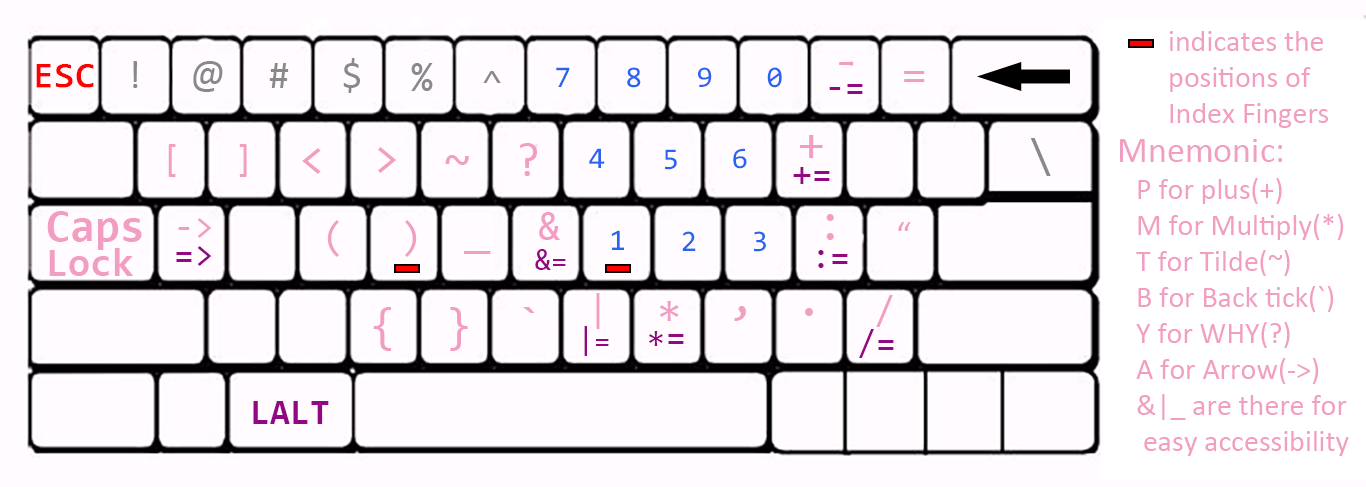
<style>
.page{position:relative;width:1366px;height:487px;background:#fffbff}
.page>*{position:absolute;margin:0}
.t1{font:30px/36px "Calibri";color:#f19ec2}
.t2{font:36px "Consolas";color:#ff0000;font-weight:bold}
.t3{font:40px "Calibri";color:#898989}
.t4{font:40px "Consolas";color:#898989}
.t5{font:48px "Consolas";color:#f19ec2}
.t6{font:30px "Consolas";color:#2764f0}
.t7{font:36px "Consolas";color:#920783}
.t8{font:40px "Calibri";color:#f19ec2}
.t9{font:48px "Consolas";color:#898989}
.t10{font:36px "Calibri";color:#f19ec2}
.t11{font:45px "Consolas-Bold";color:#f19ec2}
.t12{font:36px "Consolas";color:#f19ec2}
.t13{font:40px "Consolas";color:#f19ec2}
.t14{font:40px "Consolas-Bold";color:#f19ec2}
.t15{font:30px "Consolas";color:#920783}
.t16{font:36px "Consolas-Bold";color:#920783}
</style>
<div class="page">
<p class="t1" style="left:1169px;top:31px;width:159px;height:97px">indicates the <br>positions of <br>Index Fingers</p>
<p class="t2" style="left:36px;top:64px;width:58px;height:24px">ESC</p>
<p class="t3" style="left:133px;top:61px;width:5px;height:27px">!</p>
<p class="t3" style="left:193px;top:61px;width:30px;height:31px">@</p>
<p class="t3" style="left:269px;top:63px;width:20px;height:25px">#</p>
<p class="t3" style="left:343px;top:58px;width:17px;height:35px">$</p>
<p class="t4" style="left:411px;top:63px;width:22px;height:28px">%</p>
<p class="t5" style="left:839px;top:62px;width:15px;height:3px">-</p>
<p class="t4" style="left:483px;top:71px;width:18px;height:12px">^</p>
<p class="t6" style="left:556px;top:67px;width:14px;height:20px">7</p>
<p class="t6" style="left:627px;top:67px;width:14px;height:21px">8</p>
<p class="t6" style="left:698px;top:67px;width:14px;height:20px">9</p>
<p class="t6" style="left:767px;top:67px;width:15px;height:21px">0</p>
<p class="t5" style="left:904px;top:71px;width:21px;height:11px">=</p>
<p class="t7" style="left:829px;top:84px;width:34px;height:10px">-=</p>
<p class="t5" style="left:800px;top:135px;width:23px;height:23px">+</p>
<p class="t8" style="left:168px;top:144px;width:8px;height:33px">[</p>
<p class="t8" style="left:239px;top:144px;width:8px;height:33px">]</p>
<p class="t5" style="left:302px;top:148px;width:19px;height:26px">&lt;</p>
<p class="t5" style="left:378px;top:147px;width:18px;height:26px">&gt;</p>
<p class="t6" style="left:589px;top:148px;width:16px;height:20px">4</p>
<p class="t6" style="left:665px;top:149px;width:12px;height:21px">5</p>
<p class="t6" style="left:733px;top:148px;width:14px;height:21px">6</p>
<p class="t9" style="left:1030px;top:138px;width:21px;height:38px">\</p>
<p class="t10" style="left:1120px;top:139px;width:162px;height:23px">Mnemonic:</p>
<p class="t5" style="left:445px;top:155px;width:24px;height:10px">~</p>
<p class="t7" style="left:793px;top:167px;width:37px;height:17px">+=</p>
<p class="t1" style="left:1136px;top:178px;width:213px;height:278px">P for plus(+)<br>M for Multiply(*)<br>T for Tilde(~)<br>B for Back tick(`)<br>Y for WHY(?)<br>A for Arrow(-&gt;)<br>&amp;|_ are there for<br> easy accessibility</p>
<p class="t11" style="left:47px;top:211px;width:95px;height:39px">Caps</p>
<p class="t12" style="left:178px;top:218px;width:34px;height:20px">-&gt;</p>
<p class="t13" style="left:327px;top:220px;width:12px;height:37px">(</p>
<p class="t13" style="left:405px;top:220px;width:12px;height:37px">)</p>
<p class="t13" style="left:539px;top:212px;width:21px;height:28px">&amp;</p>
<p class="t5" style="left:826px;top:214px;width:8px;height:26px">:</p>
<p class="t6" style="left:611px;top:230px;width:13px;height:20px">1</p>
<p class="t6" style="left:682px;top:231px;width:14px;height:20px">2</p>
<p class="t6" style="left:754px;top:231px;width:12px;height:21px">3</p>
<p class="t7" style="left:176px;top:246px;width:36px;height:20px">=&gt;</p>
<p class="t14" style="left:49px;top:248px;width:85px;height:28px">Lock</p>
<p class="t5" style="left:464px;top:251px;width:27px;height:3px">_</p>
<p class="t15" style="left:535px;top:249px;width:31px;height:21px">&amp;=</p>
<p class="t7" style="left:818px;top:250px;width:30px;height:18px">:=</p>
<p class="t12" style="left:596px;top:293px;width:4px;height:36px">|</p>
<p class="t5" style="left:660px;top:301px;width:19px;height:20px">*</p>
<p class="t13" style="left:876px;top:295px;width:17px;height:32px">/</p>
<p class="t5" style="left:373px;top:307px;width:18px;height:44px">{</p>
<p class="t5" style="left:450px;top:307px;width:18px;height:44px">}</p>
<p class="t5" style="left:523px;top:307px;width:12px;height:6px">`</p>
<p class="t5" style="left:734px;top:306px;width:12px;height:15px">,</p>
<p class="t5" style="left:805px;top:308px;width:8px;height:8px">.</p>
<p class="t15" style="left:584px;top:326px;width:25px;height:30px">|=</p>
<p class="t7" style="left:859px;top:329px;width:35px;height:29px">/=</p>
<p class="t7" style="left:649px;top:331px;width:14px;height:15px">*</p>
<p class="t7" style="left:668px;top:334px;width:16px;height:10px">=</p>
<p class="t16" style="left:253px;top:401px;width:76px;height:23px">LALT</p>
</div>
